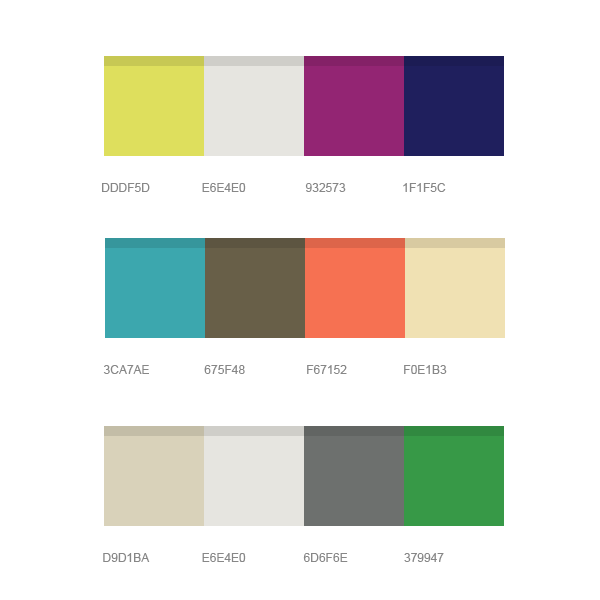
<style>
.page{position:relative;width:600px;height:600px;background:#ffffff}
.page>*{position:absolute;margin:0}
.t1{font:12px "ArialMT";color:#878787;text-transform:uppercase}
</style>
<div class="page">
<p class="t1" style="left:102px;top:183px;width:48px;height:9px">dddf5d</p>
<p class="t1" style="left:202px;top:183px;width:44px;height:9px">e6e4e0</p>
<p class="t1" style="left:305px;top:183px;width:41px;height:9px">932573</p>
<p class="t1" style="left:403px;top:183px;width:43px;height:9px">1f1f5c</p>
<p class="t1" style="left:103px;top:365px;width:46px;height:9px">3ca7ae</p>
<p class="t1" style="left:204px;top:365px;width:41px;height:9px">675f48</p>
<p class="t1" style="left:307px;top:365px;width:40px;height:9px">f67152</p>
<p class="t1" style="left:404px;top:365px;width:43px;height:9px">f0e1b3</p>
<p class="t1" style="left:103px;top:553px;width:47px;height:9px">d9d1ba</p>
<p class="t1" style="left:202px;top:553px;width:44px;height:9px">e6e4e0</p>
<p class="t1" style="left:303px;top:553px;width:45px;height:9px">6d6f6e</p>
<p class="t1" style="left:404px;top:553px;width:40px;height:9px">379947</p>
</div>
